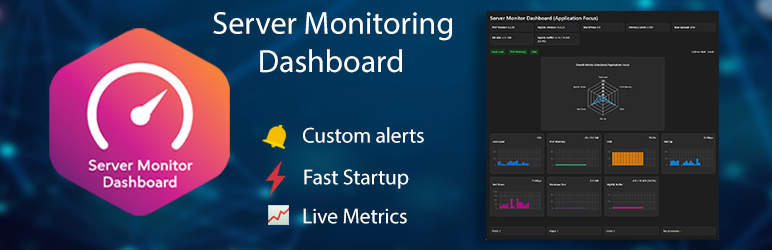
<style>
.page{position:relative;width:772px;height:250px}
.page>*{position:absolute;margin:0}
.t1{font:32px "MyriadPro-Regular";color:#ffffff}
.t2{font:21.3px "MyriadPro-Regular";color:#ffffff}
</style>
<div class="page">
<p class="t1" style="left:213px;top:12px;width:239px;height:61px;text-align:center"><span class="t2">                                  </span>Server Monitoring <br>                     Dashboard</p>
<p class="t2" style="left:303px;top:127px;width:121px;height:16px">Custom alerts</p>
<p class="t2" style="left:304px;top:169px;width:105px;height:20px">Fast Startup</p>
<p class="t2" style="left:303px;top:208px;width:104px;height:16px">Live Metrics</p>
</div>
